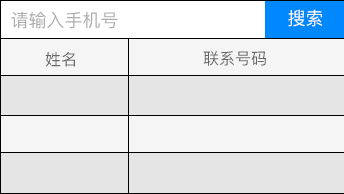
<style>
.page{position:relative;width:344px;height:194px;background:#e5e5e5}
.page>*{position:absolute;margin:0}
.t1{font:18px "PingFang-SC-Medium";color:#ababab}
.t2{font:18px "PingFang-SC-Medium";color:#ffffff}
.t3{font:16px "PingFang-SC-Medium";color:#666666}
</style>
<div class="page">
<p class="t1" style="left:11px;top:11px;width:107px;height:18px">请输入手机号</p>
<p class="t2" style="left:288px;top:9px;width:35px;height:18px">搜索</p>
<p class="t3" style="left:45px;top:52px;width:30px;height:15px">姓名</p>
<p class="t3" style="left:203px;top:51px;width:63px;height:15px">联系号码</p>
</div>
